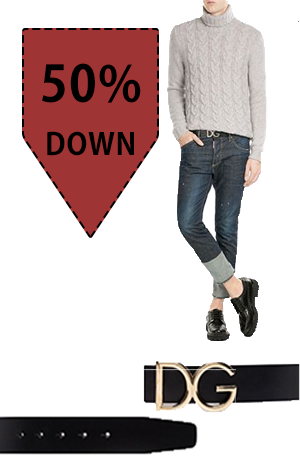
<style>
.page{position:relative;width:300px;height:468px;background:#ffffff}
.page>*{position:absolute;margin:0}
.t1{font:50px "AdobeGothicStd-Bold";letter-spacing:0.025em;color:#000000}
.t2{font:30px "AdobeGothicStd-Bold";letter-spacing:0.025em;color:#000000}
</style>
<div class="page">
<p class="t1" style="left:42px;top:63px;width:99px;height:40px">50%</p>
<p class="t2" style="left:47px;top:131px;width:87px;height:25px">DOWN</p>
</div>
